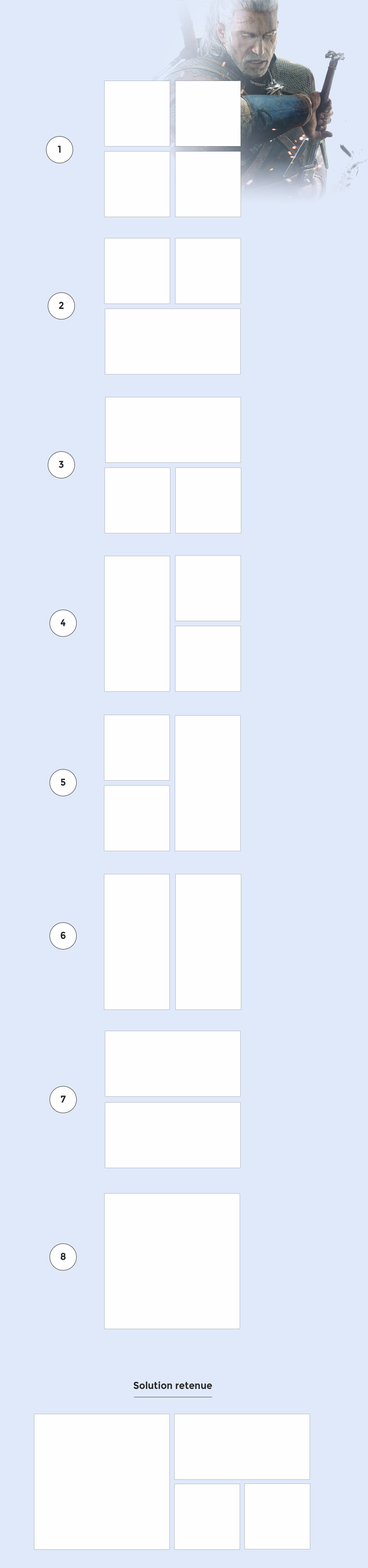
<style>
.page{position:relative;width:368px;height:1568px;background:#e0e9f9}
.page>*{position:absolute;margin:0}
.t1{font:10px "Montserrat-Bold";color:#2b2b2c;scale:0.93 1}
</style>
<div class="page">
<p class="t1" style="left:58px;top:146px;width:3px;height:7px">1</p>
<p class="t1" style="left:59px;top:302px;width:5px;height:7px">2</p>
<p class="t1" style="left:59px;top:461px;width:5px;height:7px">3</p>
<p class="t1" style="left:60px;top:619px;width:6px;height:7px">4</p>
<p class="t1" style="left:61px;top:779px;width:5px;height:7px">5</p>
<p class="t1" style="left:60px;top:931px;width:6px;height:8px">6</p>
<p class="t1" style="left:61px;top:1095px;width:5px;height:8px">7</p>
<p class="t1" style="left:60px;top:1253px;width:6px;height:7px">8</p>
<p class="t1" style="left:133px;top:1381px;width:79px;height:8px">Solution retenue</p>
</div>
